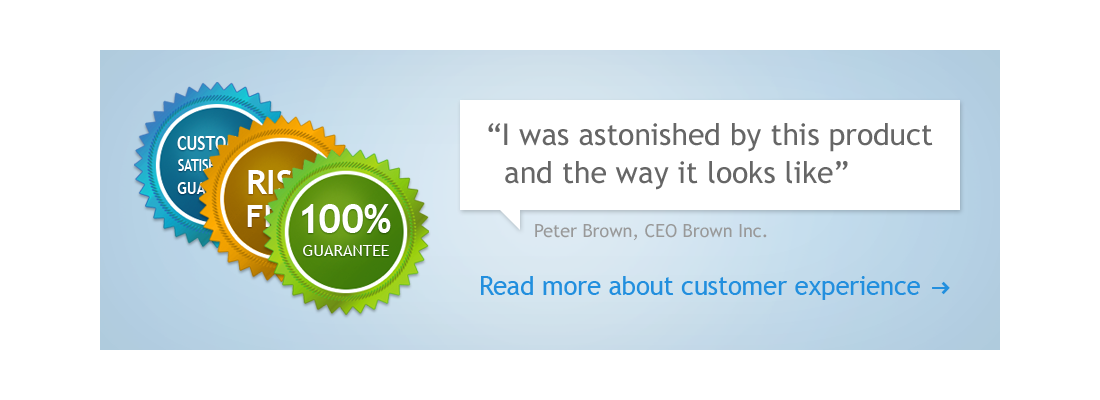
<style>
.page{position:relative;width:1100px;height:400px;background:#ffffff}
.page>*{position:absolute;margin:0}
.t1{font:30px/38px "TrebuchetMS";color:#666666}
.t2{font:19.4px "TrebuchetMS-Bold";text-transform:uppercase;scale:0.83 1}
.t3{font:15.1px "TrebuchetMS-Bold";text-transform:uppercase;scale:0.83 1}
.t4{font:34.2px "TrebuchetMS-Bold";text-transform:uppercase}
.t5{font:17.3px "TrebuchetMS-Bold";text-transform:uppercase;scale:0.83 1}
.t6{font:30.6px "TrebuchetMS-Bold";text-transform:uppercase}
.t7{font:39.6px "TrebuchetMS-Bold";color:#ffffff;text-transform:uppercase}
.t8{font:18px "TrebuchetMS";color:#999999}
.t9{font:16.2px "TrebuchetMS";color:#ffffff;text-transform:uppercase}
.t10{font:26px "TrebuchetMS";letter-spacing:-0.01em;color:#228fde}
</style>
<div class="page">
<p class="t1" style="left:488px;top:123px;width:445px;height:67px">“I was astonished by this product<br>  and the way it looks like”</p>
<p class="t2" style="left:177px;top:136px;width:81px;height:14px">customer</p>
<p class="t3" style="left:178px;top:159px;width:80px;height:12px">satisfaction</p>
<p class="t4" style="left:248px;top:170px;width:67px;height:24px">Risk</p>
<p class="t5" style="left:177px;top:182px;width:81px;height:12px">guarantee</p>
<p class="t6" style="left:247px;top:205px;width:69px;height:22px">Free</p>
<p class="t7" style="left:302px;top:204px;width:89px;height:29px">100%</p>
<p class="t8" style="left:535px;top:224px;width:232px;height:17px">Peter Brown, CEO Brown Inc.</p>
<p class="t9" style="left:303px;top:245px;width:86px;height:11px">guarantee</p>
<p class="t10" style="left:481px;top:276px;width:439px;height:24px">Read more about customer experience</p>
</div>
